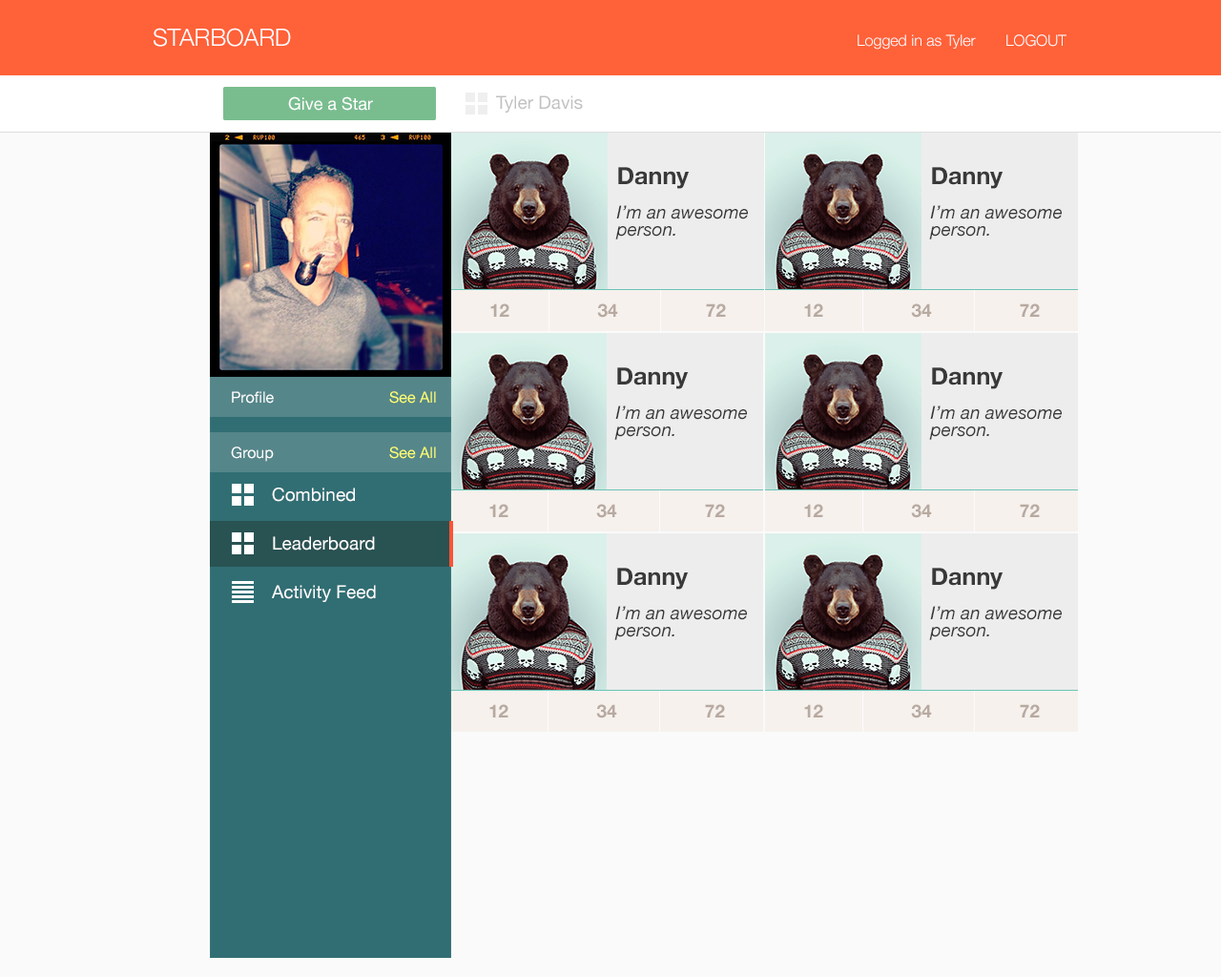
<style>
.page{position:relative;width:1221px;height:977px;background:#fafafa}
.page>*{position:absolute;margin:0}
.t1{font:23.8px "HelveticaNeue-Light";color:#ffffff}
.t2{font:15.3px "HelveticaNeue-Light";color:#ffffff}
.t3{font:17.2px "HelveticaNeue";color:#ffffff}
.t4{font:18.1px "HelveticaNeue";color:#c1c1c1}
.t5{font:18.1px/17.2px "HelveticaNeue-Italic";color:#393939}
.t6{font:23.8px/17.2px "HelveticaNeue-Bold";color:#393939}
.t7{font:18.1px "HelveticaNeue-Bold";color:#b7aaa1}
.t8{font:15.3px "HelveticaNeue";color:#ffffff}
.t9{font:15.3px "HelveticaNeue";color:#ffff6e}
.t10{font:18.1px "HelveticaNeue";color:#ffffff}
</style>
<div class="page">
<p class="t1" style="left:154px;top:28px;width:137px;height:19px">STARBOARD</p>
<p class="t2" style="left:857px;top:34px;width:119px;height:16px">Logged in as Tyler</p>
<p class="t2" style="left:1006px;top:34px;width:60px;height:13px">LOGOUT</p>
<p class="t3" style="left:288px;top:96px;width:85px;height:15px">Give a Star</p>
<p class="t4" style="left:496px;top:95px;width:87px;height:18px">Tyler Davis</p>
<p class="t5" style="left:615px;top:167px;width:133px;height:72px"><span class="t6">Danny<br><br></span>I’m an awesome person.</p>
<p class="t5" style="left:929px;top:167px;width:133px;height:72px"><span class="t6">Danny<br><br></span>I’m an awesome person.</p>
<p class="t7" style="left:490px;top:303px;width:236px;height:15px">12 34 72</p>
<p class="t7" style="left:804px;top:303px;width:236px;height:15px">12 34 72</p>
<p class="t5" style="left:614px;top:367px;width:133px;height:73px"><span class="t6">Danny<br><br></span>I’m an awesome person.</p>
<p class="t5" style="left:929px;top:367px;width:133px;height:73px"><span class="t6">Danny<br><br></span>I’m an awesome person.</p>
<p class="t8" style="left:232px;top:391px;width:42px;height:12px">Profile</p>
<p class="t9" style="left:389px;top:391px;width:47px;height:12px">See All</p>
<p class="t8" style="left:231px;top:446px;width:43px;height:16px">Group</p>
<p class="t9" style="left:389px;top:446px;width:47px;height:13px">See All</p>
<p class="t10" style="left:272px;top:487px;width:83px;height:15px">Combined</p>
<p class="t7" style="left:489px;top:504px;width:236px;height:14px">12 34 72</p>
<p class="t7" style="left:804px;top:504px;width:236px;height:14px">12 34 72</p>
<p class="t10" style="left:273px;top:536px;width:102px;height:14px">Leaderboard</p>
<p class="t5" style="left:614px;top:568px;width:133px;height:72px"><span class="t6">Danny<br><br></span>I’m an awesome person.</p>
<p class="t5" style="left:929px;top:568px;width:133px;height:72px"><span class="t6">Danny<br><br></span>I’m an awesome person.</p>
<p class="t10" style="left:272px;top:585px;width:104px;height:17px">Activity Feed</p>
<p class="t7" style="left:489px;top:704px;width:236px;height:14px">12 34 72</p>
<p class="t7" style="left:804px;top:704px;width:236px;height:14px">12 34 72</p>
</div>
